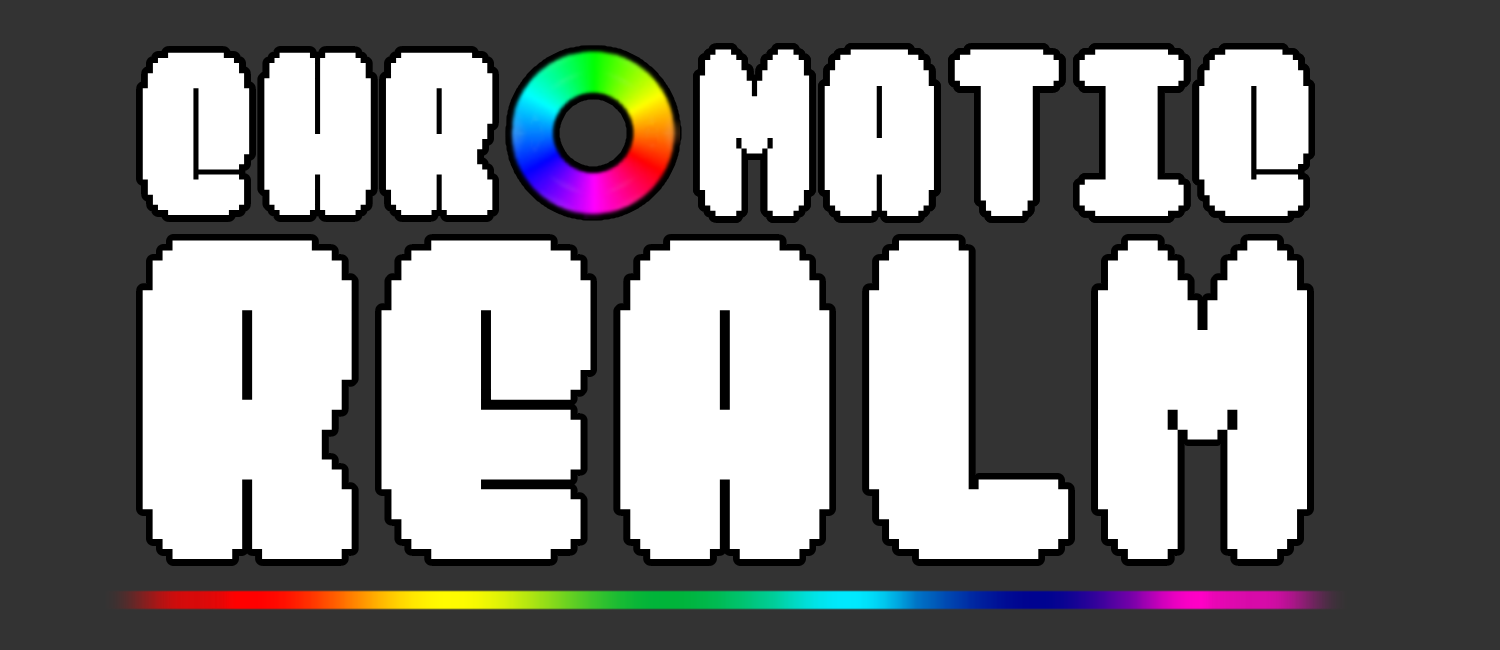
<style>
.page{position:relative;width:1500px;height:650px;background:#333333}
.page>*{position:absolute;margin:0}
.t1{font:162.1px "Hevuish";color:#ffffff}
.t2{font:166.5px "Hevuish";color:#ffffff}
.t3{font:318.5px "Hevuish";color:#ffffff}
</style>
<div class="page">
<p class="t1" style="left:142px;top:52px;width:351px;height:163px">CHR</p>
<p class="t2" style="left:699px;top:49px;width:610px;height:167px">MATIC</p>
<p class="t2" style="left:699px;top:49px;width:610px;height:167px">MATIC</p>
<p class="t3" style="left:142px;top:240px;width:1166px;height:319px">REALM</p>
</div>
